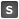
<style>
.page{position:relative;width:19px;height:19px}
.page>*{position:absolute;margin:0}
.t1{font:12px "ProximaNova-Bold";color:#ffffff}
</style>
<div class="page">
<p class="t1" style="left:6px;top:5px;width:7px;height:9px">S</p>
</div>
